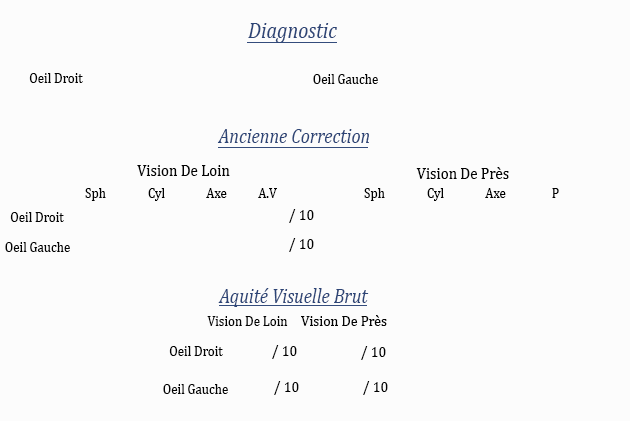
<style>
.page{position:relative;width:630px;height:421px;background:#fcfcfc}
.page>*{position:absolute;margin:0}
.t1{font:22.8px "Cambria-Italic";color:#2c4476;scale:0.88 1}
.t2{font:14.8px "Cambria";color:#030303;scale:0.88 1}
.t3{font:20.5px "Cambria-Italic";color:#2c4476;scale:0.88 1}
.t4{font:17.1px "Cambria";color:#030303;scale:0.88 1}
.t5{font:14.8px "Cambria";color:#000000;scale:0.88 1}
.t6{font:16px "Cambria";color:#030303;scale:0.88 1}
</style>
<div class="page">
<p class="t1" style="left:248px;top:23px;width:89px;height:20px">Diagnostic</p>
<p class="t2" style="left:29px;top:73px;width:54px;height:10px">Oeil Droit</p>
<p class="t2" style="left:313px;top:74px;width:65px;height:10px">Oeil Gauche</p>
<p class="t3" style="left:217px;top:129px;width:152px;height:14px">Ancienne Correction</p>
<p class="t4" style="left:137px;top:165px;width:93px;height:11px">Vision De Loin</p>
<p class="t4" style="left:416px;top:167px;width:93px;height:12px">Vision De Près</p>
<p class="t5" style="left:85px;top:188px;width:21px;height:13px">Sph</p>
<p class="t5" style="left:148px;top:188px;width:17px;height:13px">Cyl</p>
<p class="t5" style="left:206px;top:188px;width:21px;height:10px">Axe</p>
<p class="t5" style="left:258px;top:188px;width:19px;height:10px">A.V</p>
<p class="t5" style="left:364px;top:188px;width:21px;height:13px">Sph</p>
<p class="t5" style="left:427px;top:188px;width:17px;height:13px">Cyl</p>
<p class="t5" style="left:485px;top:188px;width:21px;height:10px">Axe</p>
<p class="t5" style="left:552px;top:188px;width:7px;height:10px">P</p>
<p class="t6" style="left:289px;top:209px;width:25px;height:14px">10 /</p>
<p class="t2" style="left:10px;top:212px;width:54px;height:10px">Oeil Droit</p>
<p class="t2" style="left:5px;top:242px;width:65px;height:10px">Oeil Gauche</p>
<p class="t6" style="left:289px;top:238px;width:25px;height:14px">10 /</p>
<p class="t3" style="left:218px;top:288px;width:151px;height:19px">Aquité Visuelle Brut</p>
<p class="t2" style="left:207px;top:316px;width:81px;height:10px">Vision De Loin</p>
<p class="t6" style="left:301px;top:315px;width:86px;height:11px">Vision De Près</p>
<p class="t2" style="left:169px;top:346px;width:54px;height:10px">Oeil Droit</p>
<p class="t6" style="left:272px;top:345px;width:25px;height:14px">10 /</p>
<p class="t6" style="left:361px;top:346px;width:25px;height:14px">10 /</p>
<p class="t2" style="left:163px;top:384px;width:65px;height:10px">Oeil Gauche</p>
<p class="t6" style="left:274px;top:381px;width:25px;height:14px">10 /</p>
<p class="t6" style="left:363px;top:381px;width:25px;height:14px">10 /</p>
</div>
